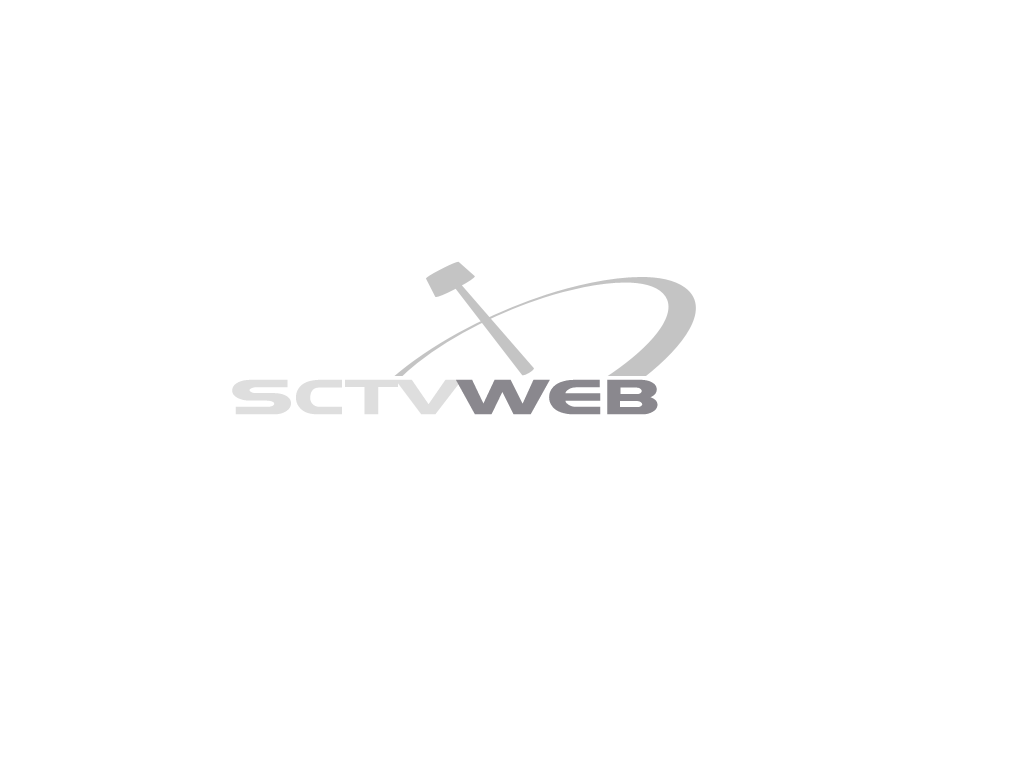
<style>
.page{position:relative;width:1024px;height:768px;background:#ffffff}
.page>*{position:absolute;margin:0}
.t1{font:47.3px "Denmark";color:#dedede;font-weight:bold;scale:1.6 1}
.t2{font:47.3px "Denmark";color:#8a888e;font-weight:bold;scale:1.6 1}
</style>
<div class="page">
<p class="t1" style="left:232px;top:379px;width:426px;height:36px">SCTV<span class="t2">WEB</span></p>
</div>
